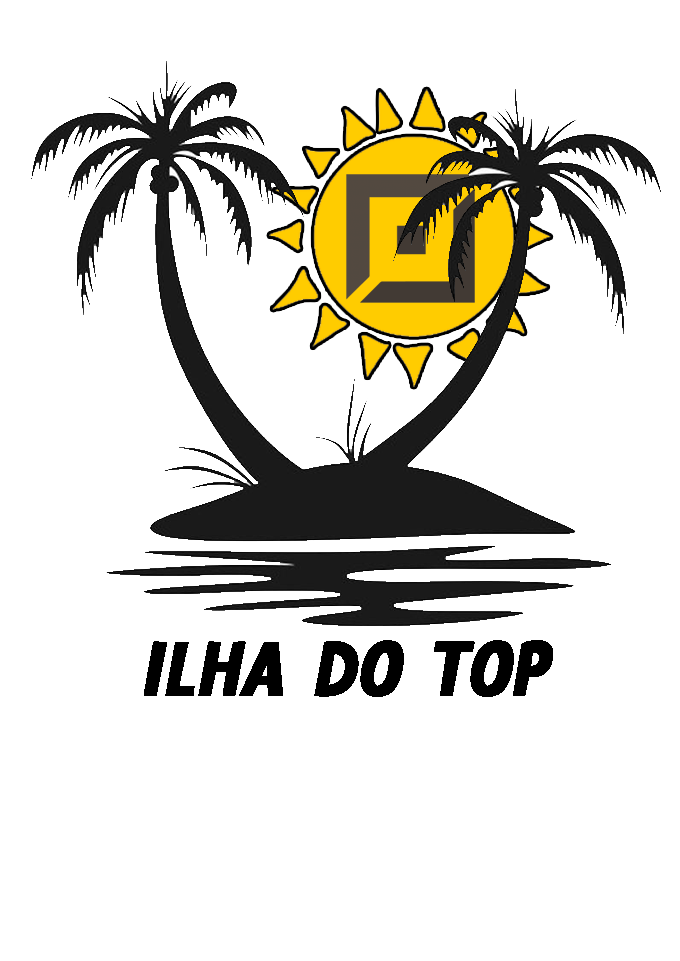
<style>
.page{position:relative;width:680px;height:961px;background:#ffffff}
.page>*{position:absolute;margin:0}
.t1{font:85.2px "HETIKADemoRegular";color:#000000;font-weight:bold;font-style:italic}
</style>
<div class="page">
<p class="t1" style="left:144px;top:640px;width:409px;height:57px">ilha do top</p>
</div>
